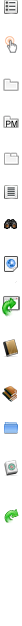
<style>
.page{position:relative;width:22px;height:626px;background:#ffffff}
.page>*{position:absolute;margin:0}
.t1{font:8.5px "ArialMT";color:#000000}
</style>
<div class="page">
<p class="t1" style="left:6px;top:120px;width:12px;height:7px">PM</p>
</div>
